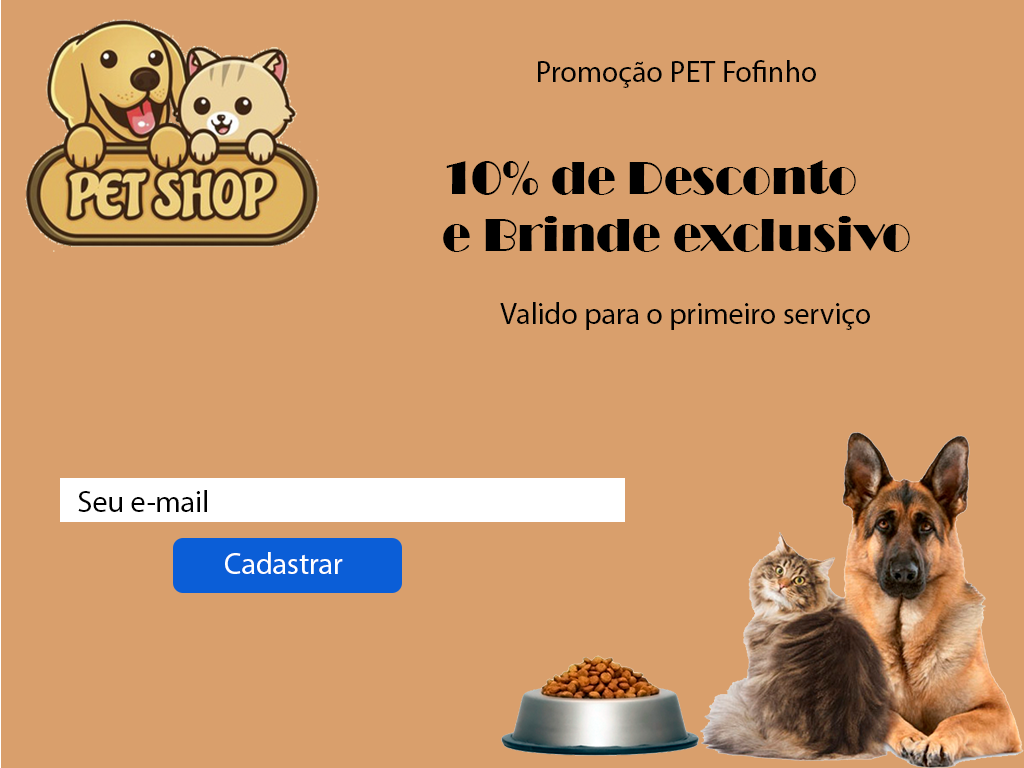
<style>
.page{position:relative;width:1024px;height:768px;background:#d99f6c}
.page>*{position:absolute;margin:0}
.t1{font:30px "MyriadPro-Regular";color:#000000}
.t2{font:48px "Broadway";color:#000000}
.t3{font:30px "MyriadPro-Regular";color:#ffffff}
</style>
<div class="page">
<p class="t1" style="left:538px;top:60px;width:278px;height:28px">Promoção PET Fofinho</p>
<p class="t2" style="left:443px;top:160px;width:467px;height:92px">10% de Desconto<br>e Brinde exclusivo</p>
<p class="t1" style="left:500px;top:302px;width:370px;height:28px">Valido para o primeiro serviço</p>
<p class="t1" style="left:78px;top:490px;width:129px;height:22px">Seu e-mail</p>
<p class="t3" style="left:225px;top:552px;width:118px;height:22px">Cadastrar</p>
</div>
